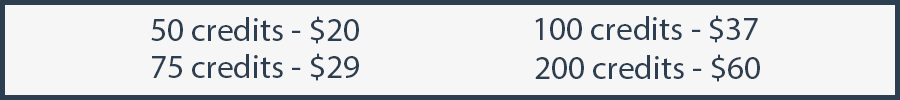
<style>
.page{position:relative;width:900px;height:100px;background:#f6f6f6}
.page>*{position:absolute;margin:0}
.t1{font:33.3px "MyriadPro-Regular";color:#2c3e50}
</style>
<div class="page">
<p class="t1" style="left:151px;top:16px;width:208px;height:28px">50 credits - $20</p>
<p class="t1" style="left:535px;top:15px;width:223px;height:28px">100 credits - $37</p>
<p class="t1" style="left:152px;top:53px;width:207px;height:28px">75 credits - $29</p>
<p class="t1" style="left:535px;top:54px;width:225px;height:28px">200 credits - $60</p>
</div>
